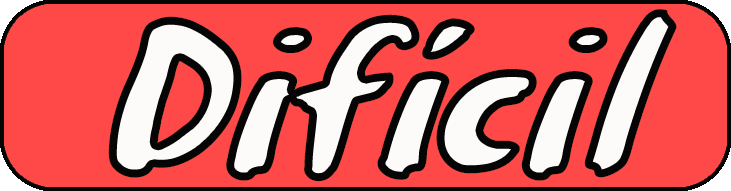
<style>
.page{position:relative;width:731px;height:191px;background:#ff4949}
.page>*{position:absolute;margin:0}
.t1{font:190px "Knewave-Regular";letter-spacing:-0.025em;scale:1.12 1}
</style>
<div class="page">
<p class="t1" style="left:108px;top:9px;width:569px;height:173px">Difícil</p>
</div>
